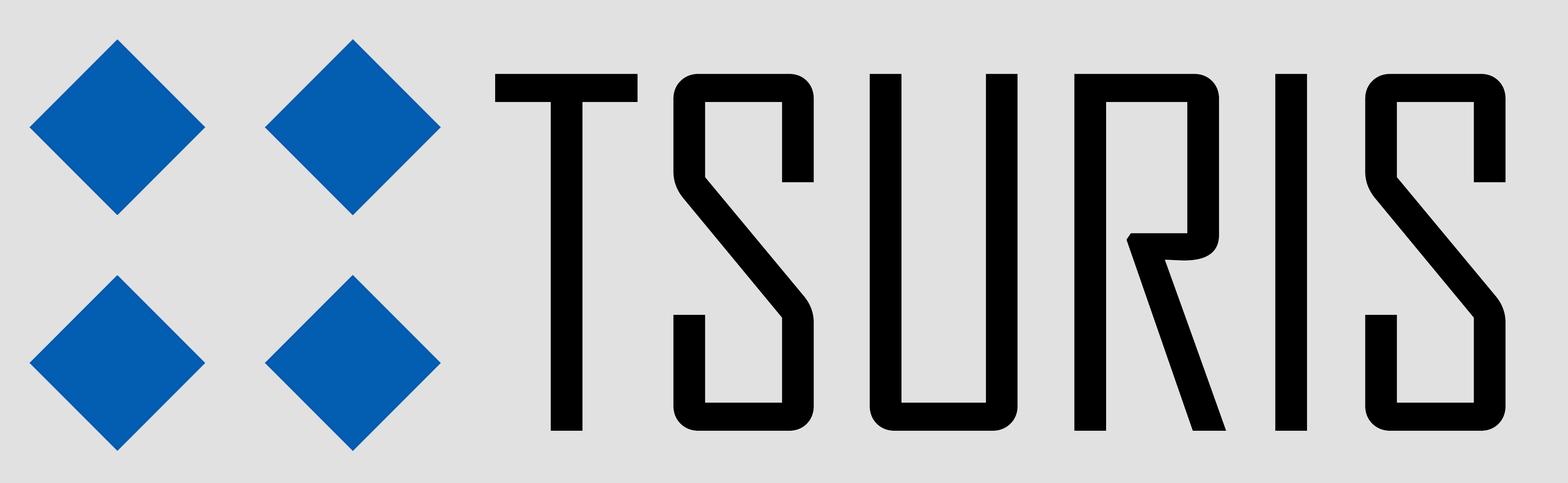
<style>
.page{position:relative;width:1568px;height:483px;background:#e1e1e1}
.page>*{position:absolute;margin:0}
.t1{font:466.5px "AgencyFB-Reg";color:#000000}
</style>
<div class="page">
<p class="t1" style="left:495px;top:74px;width:1011px;height:356px">TSURIS</p>
</div>
